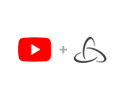
<style>
.page{position:relative;width:120px;height:96px;background:#ffffff}
.page>*{position:absolute;margin:0}
.t1{font:14px "Futura-Bold";letter-spacing:0.05em;color:#aaaaaa}
</style>
<div class="page">
<p class="t1" style="left:59px;top:46px;width:8px;height:8px">+</p>
</div>
